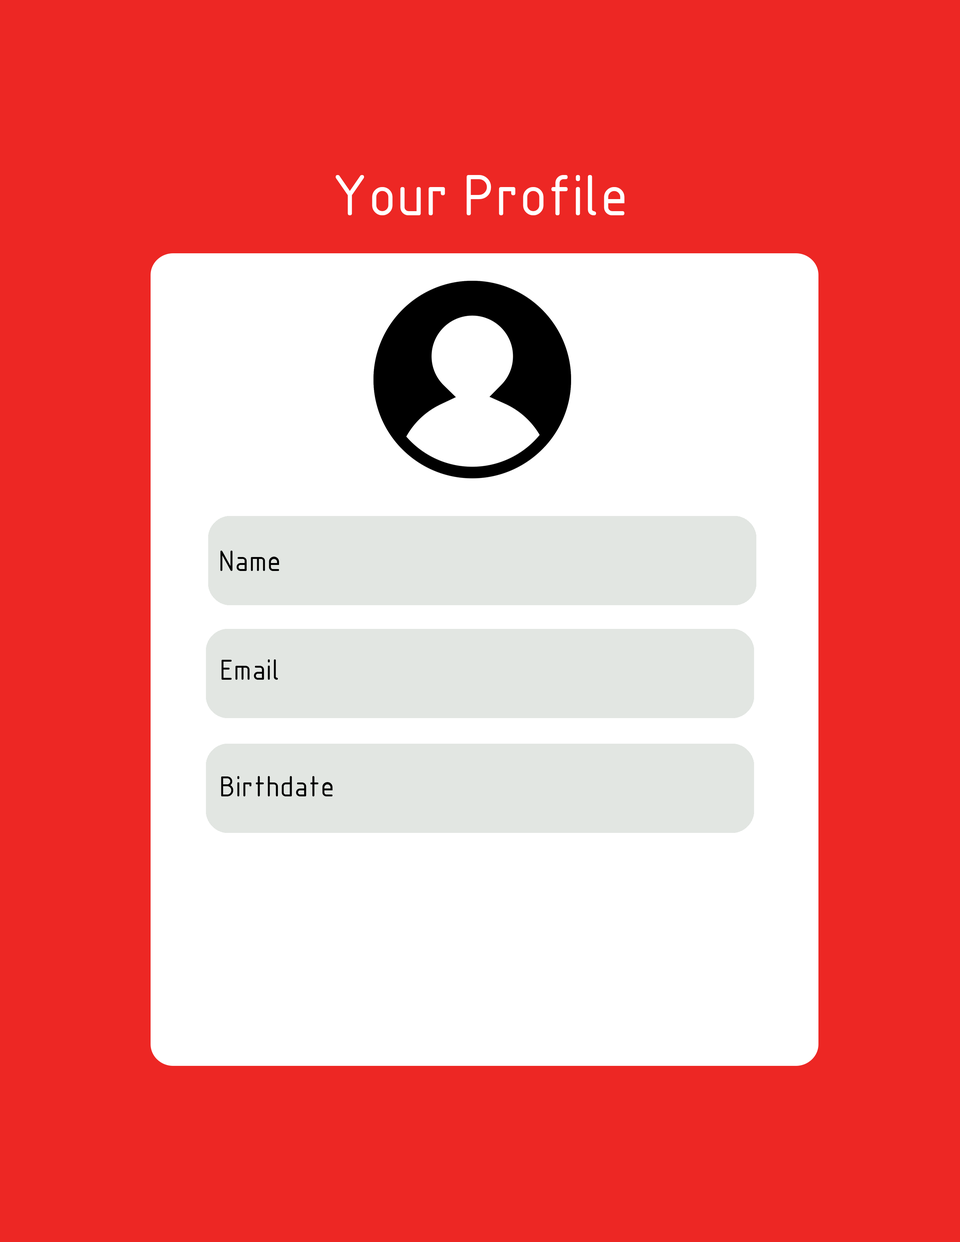
<style>
.page{position:relative;width:960px;height:1242px;background:#ed2724}
.page>*{position:absolute;margin:0}
.t1{font:56.5px "GOST-Common";color:#ffffff}
.t2{font:28.2px "GOST-Common";color:#000000}
</style>
<div class="page">
<p class="t1" style="left:335px;top:175px;width:290px;height:40px">Your Profile</p>
<p class="t2" style="left:220px;top:551px;width:59px;height:20px">Name</p>
<p class="t2" style="left:221px;top:660px;width:57px;height:20px">Email</p>
<p class="t2" style="left:221px;top:776px;width:112px;height:21px">Birthdate</p>
</div>
